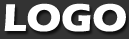
<style>
.page{position:relative;width:129px;height:39px;background:#ffffff}
.page>*{position:absolute;margin:0}
.t1{font:40px "ErasITC-Bold";color:#ffffff}
</style>
<div class="page">
<p class="t1" style="left:4px;top:3px;width:122px;height:29px">LOGO</p>
</div>
